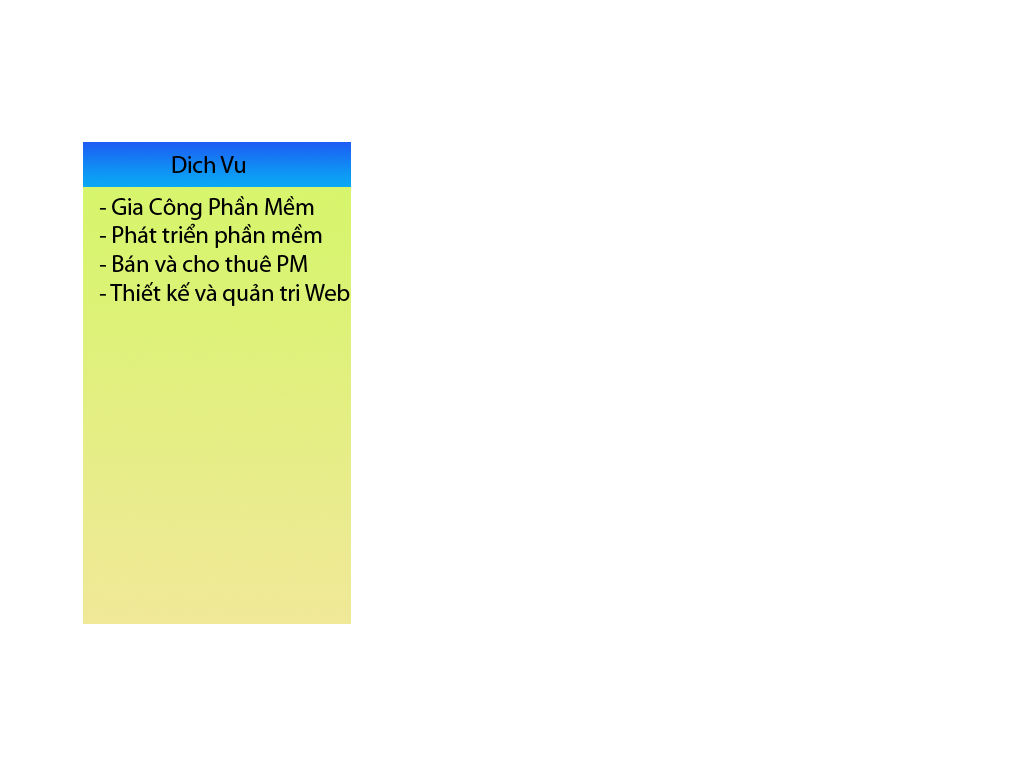
<style>
.page{position:relative;width:1024px;height:768px;background:#ffffff}
.page>*{position:absolute;margin:0}
.t1{font:24px "MyriadPro-Regular";color:#000000}
</style>
<div class="page">
<p class="t1" style="left:172px;top:156px;width:73px;height:17px">Dich Vu</p>
<p class="t1" style="left:99px;top:196px;width:251px;height:110px">- Gia Công Phần Mềm<br>- Phát triển phần mềm<br>- Bán và cho thuê PM<br>- Thiết kế và quản tri Web</p>
</div>
